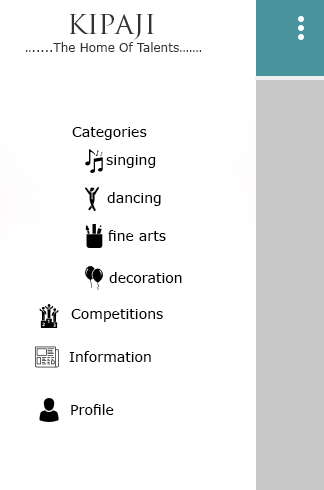
<style>
.page{position:relative;width:324px;height:490px;background:#ffffff}
.page>*{position:absolute;margin:0}
.t1{font:30px "TrajanPro-Regular";color:#333333}
.t2{font:12px "Verdana";color:#333333}
.t3{font:9px "Verdana";color:#333333}
.t4{font:14px "Verdana";color:#000000}
</style>
<div class="page">
<p class="t1" style="left:69px;top:14px;width:85px;height:26px">kipaji</p>
<p class="t2" style="left:26px;top:42px;width:175px;height:10px"><span class="t3">.......</span>The Home Of Talents.....<span class="t3">..</span></p>
<p class="t4" style="left:72px;top:127px;width:75px;height:13px">Categories</p>
<p class="t4" style="left:106px;top:155px;width:50px;height:13px">singing</p>
<p class="t4" style="left:107px;top:192px;width:54px;height:14px">dancing</p>
<p class="t4" style="left:108px;top:230px;width:58px;height:11px">fine arts</p>
<p class="t4" style="left:109px;top:272px;width:73px;height:11px">decoration</p>
<p class="t4" style="left:71px;top:309px;width:92px;height:13px">Competitions</p>
<p class="t4" style="left:69px;top:351px;width:82px;height:11px">Information</p>
<p class="t4" style="left:71px;top:404px;width:43px;height:11px">Profile</p>
</div>
